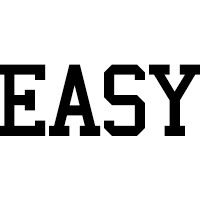
<style>
.page{position:relative;width:200px;height:200px;background:#ffffff}
.page>*{position:absolute;margin:0}
.t1{font:104.7px "College";letter-spacing:-0.06em;color:#000000}
</style>
<div class="page">
<p class="t1" style="left:0px;top:64px;width:201px;height:72px">EASY</p>
</div>
